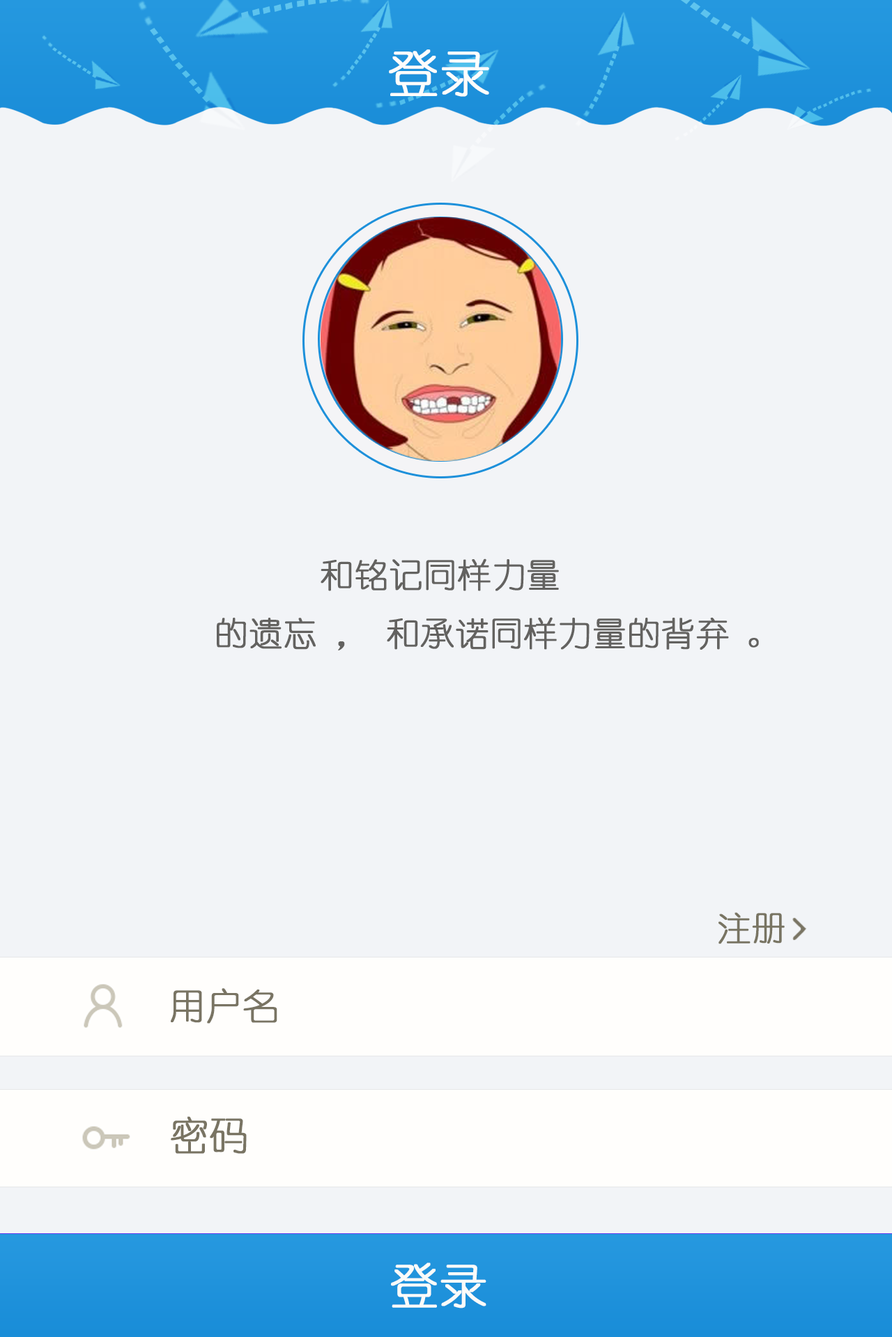
<style>
.page{position:relative;width:892px;height:1337px;background:#f2f4f7}
.page>*{position:absolute;margin:0}
.t1{font:50.2px "YouYuan";color:#fefdfb;font-weight:bold}
.t2{font:33.4px "YouYuan";color:#636260;font-weight:bold}
.t3{font:33.4px "YouYuan";color:#787462;font-weight:bold}
.t4{font:35.9px "YouYuan";color:#797463;font-weight:bold}
.t5{font:38.5px "YouYuan";color:#797463;font-weight:bold}
.t6{font:48.1px "YouYuan";color:#fbfbf9;font-weight:bold}
</style>
<div class="page">
<p class="t1" style="left:389px;top:49px;width:100px;height:48px">登录</p>
<p class="t2" style="left:217px;top:559px;width:542px;height:92px">和铭记同样力量<br>的遗忘 ，和承诺同样力量的背弃 。</p>
<p class="t3" style="left:718px;top:912px;width:66px;height:33px">注册</p>
<p class="t4" style="left:171px;top:988px;width:106px;height:36px">用户名</p>
<p class="t5" style="left:171px;top:1117px;width:76px;height:37px">密码</p>
<p class="t6" style="left:391px;top:1263px;width:95px;height:46px">登录</p>
</div>
